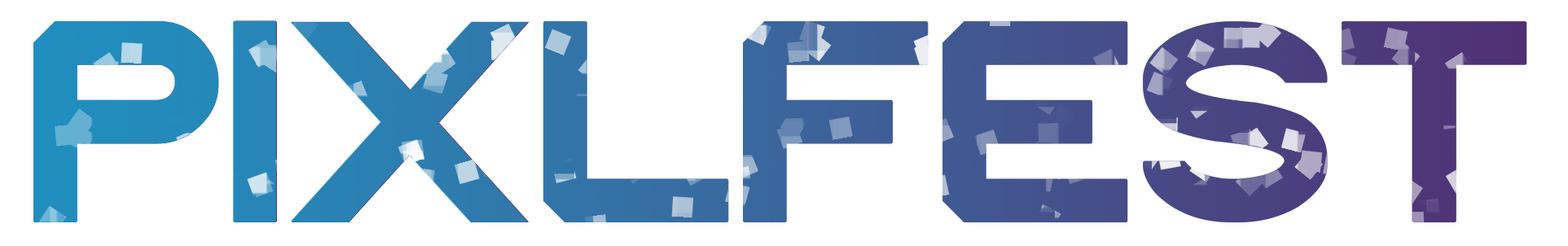
<style>
.page{position:relative;width:1568px;height:246px;background:#ffffff}
.page>*{position:absolute;margin:0}
.t1{font:305.5px "WESTJAVA"}
</style>
<div class="page">
<p class="t1" style="left:33px;top:20px;width:1494px;height:202px">PIXLFEST</p>
</div>
